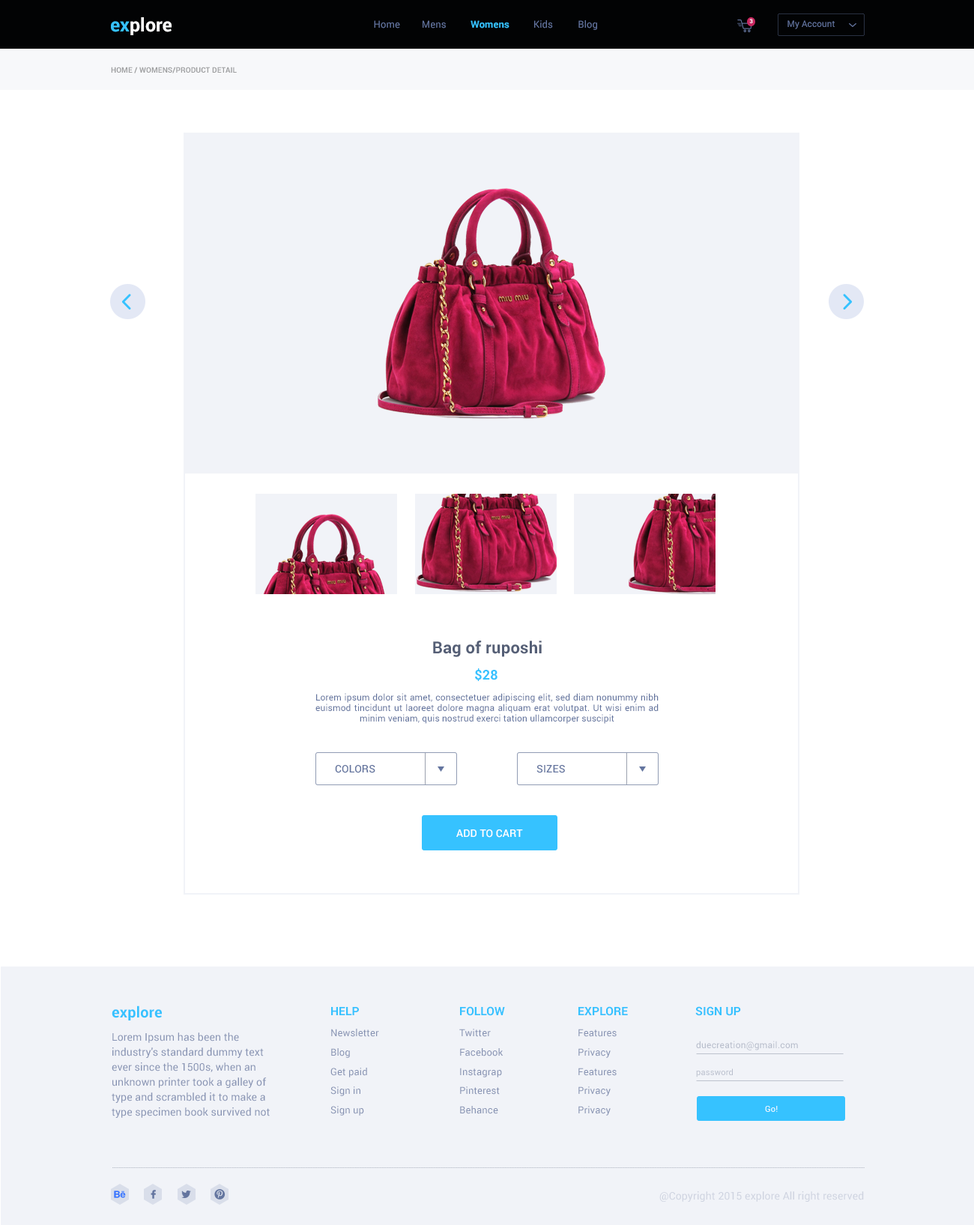
<style>
.page{position:relative;width:974px;height:1225px;background:#ffffff}
.page>*{position:absolute;margin:0}
.t1{font:18.7px "Roboto-Bold";color:#ffffff}
.t2{font:18.7px "Roboto-Bold";color:#36c2ff}
.t3{font:9.7px "Roboto-Regular";letter-spacing:0.01em;color:#64759f}
.t4{font:9.7px "Roboto-Bold";letter-spacing:0.01em;color:#36c2ff}
.t5{font:5.8px "Roboto-Bold";letter-spacing:0.01em;color:#ffffff}
.t6{font:9px "Roboto-Regular";color:#64759f}
.t7{font:7.5px "Roboto-Bold";letter-spacing:0.01em;color:#9e9fa0}
.t8{font:7.5px "Roboto-Bold";letter-spacing:0.01em;color:#9e9fa0;text-transform:uppercase}
.t9{font:16.5px "Roboto-Bold";letter-spacing:0.01em;color:#555f76}
.t10{font:13.5px "Roboto-Bold";letter-spacing:0.01em;color:#36c2ff;text-transform:uppercase}
.t11{font:9px/10.5px "Roboto-Regular";letter-spacing:0.01em;color:#64759f}
.t12{font:10.5px "Roboto-Medium";letter-spacing:0.01em;color:#64759f}
.t13{font:10.5px "Roboto-Medium";letter-spacing:0.01em;color:#ffffff}
.t14{font:15px "Roboto-Bold";letter-spacing:0.01em;color:#36c2ff}
.t15{font:9.7px/19.4px "Roboto-Regular";letter-spacing:0.01em;color:#8793b3}
.t16{font:11.5px/20.9px "Roboto-Bold";letter-spacing:0.01em;color:#36c2ff}
.t17{font:9.7px/20.9px "Roboto-Regular";letter-spacing:0.01em;color:#8793b3}
.t18{font:11.5px/20.9px "Roboto-Bold";letter-spacing:0.01em;color:#36c2ff;text-transform:uppercase}
.t19{font:11.5px "Roboto-Bold";letter-spacing:0.01em;color:#36c2ff}
.t20{font:10.5px/15px "Roboto-Regular";letter-spacing:0.01em;color:#8793b3}
.t21{font:10.5px/20.2px "Roboto-Regular";letter-spacing:0.01em;color:#8793b3}
.t22{font:9px "Roboto-Regular";letter-spacing:0.02em;color:#b8becc}
.t23{font:8.2px "Roboto-Regular";letter-spacing:0.02em;color:#b8becc}
.t24{font:8.2px "Roboto-Regular";letter-spacing:0.02em;color:#ffffff}
.t25{font:10.5px "Roboto-Regular";letter-spacing:0.01em;color:#cfd3e0}
</style>
<div class="page">
<p class="t1" style="left:111px;top:17px;width:61px;height:18px"><span class="t2">ex</span>plore</p>
<p class="t3" style="left:374px;top:20px;width:26px;height:8px">Home</p>
<p class="t3" style="left:422px;top:20px;width:24px;height:8px">Mens</p>
<p class="t4" style="left:470px;top:20px;width:39px;height:8px">Womens</p>
<p class="t3" style="left:534px;top:20px;width:19px;height:8px">Kids</p>
<p class="t3" style="left:578px;top:20px;width:19px;height:10px">Blog</p>
<p class="t5" style="left:749px;top:19px;width:4px;height:4px">3</p>
<p class="t6" style="left:787px;top:20px;width:47px;height:9px">My Account</p>
<p class="t7" style="left:111px;top:67px;width:126px;height:6px">HOME / WOMENS/<span class="t8">PRODUCT DETAIL</span></p>
<p class="t9" style="left:433px;top:640px;width:109px;height:17px">Bag of ruposhi</p>
<p class="t10" style="left:475px;top:668px;width:22px;height:13px">$28</p>
<p class="t11" style="left:315px;top:693px;width:343px;height:31px;text-align:justify">Lorem ipsum dolor sit amet, consectetuer adipiscing elit, sed diam nonummy nibh euismod tincidunt ut laoreet dolore magna aliquam erat volutpat. Ut wisi enim ad minim veniam, quis nostrud exerci tation ullamcorper suscipit</p>
<p class="t12" style="left:335px;top:765px;width:40px;height:8px">COLORS</p>
<p class="t12" style="left:536px;top:765px;width:29px;height:8px">SIZES</p>
<p class="t13" style="left:456px;top:829px;width:67px;height:8px">ADD TO CART</p>
<p class="t14" style="left:112px;top:1005px;width:50px;height:15px">explore</p>
<p class="t15" style="left:330px;top:1007px;width:49px;height:108px"><span class="t16">HELP<br></span><span class="t17">Newsletter<br></span>Blog<br>Get paid<br>Sign in<br>Sign up</p>
<p class="t15" style="left:459px;top:1006px;width:46px;height:108px"><span class="t18">Follow<br></span><span class="t17">Twitter<br></span>Facebook<br>Instagrap<br>Pinterest<br>Behance</p>
<p class="t15" style="left:578px;top:1006px;width:50px;height:109px"><span class="t18">EXPLORE<br></span><span class="t17">Features<br></span>Privacy<br>Features<br>Privacy<br>Privacy</p>
<p class="t19" style="left:695px;top:1006px;width:46px;height:10px">SIGN UP</p>
<p class="t20" style="left:112px;top:1032px;width:158px;height:86px"><span class="t21">Lorem Ipsum has been the </span>industry's standard dummy text ever since the 1500s, when an unknown printer took a galley of type and scrambled it to make a type specimen book survived not</p>
<p class="t22" style="left:696px;top:1040px;width:102px;height:10px">duecreation@gmail.com</p>
<p class="t23" style="left:696px;top:1068px;width:37px;height:9px">password</p>
<p class="t24" style="left:765px;top:1106px;width:12px;height:6px">Go!</p>
<p class="t25" style="left:659px;top:1191px;width:205px;height:10px">@Copyright 2015 explore All right reserved</p>
</div>
